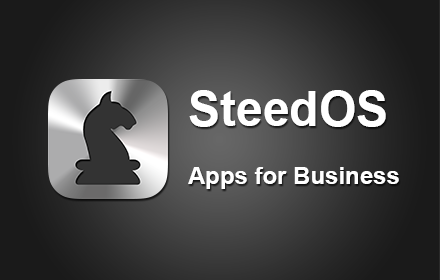
<style>
.page{position:relative;width:440px;height:280px}
.page>*{position:absolute;margin:0}
.t1{font:24px "Arial-BoldMT";color:#ffffff}
.t2{font:48px "Arial-BoldMT";color:#ffffff}
</style>
<div class="page">
<p class="t1" style="left:188px;top:90px;width:211px;height:99px"><span class="t2">SteedOS<br></span><br>Apps for Business</p>
</div>
